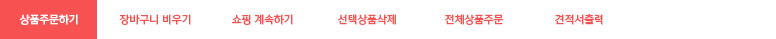
<style>
.page{position:relative;width:776px;height:39px;background:#ffffff}
.page>*{position:absolute;margin:0}
.t1{font:10px "YoonGothicPro770";color:#ffffff}
.t2{font:10px "YoonGothicPro770";color:#f85151}
</style>
<div class="page">
<p class="t1" style="left:19px;top:14px;width:59px;height:11px">상품주문하기</p>
<p class="t2" style="left:119px;top:14px;width:72px;height:11px">장바구니 비우기</p>
<p class="t2" style="left:232px;top:14px;width:61px;height:11px">쇼핑 계속하기</p>
<p class="t2" style="left:337px;top:14px;width:59px;height:11px">선택상품삭제</p>
<p class="t2" style="left:444px;top:14px;width:60px;height:11px">전체상품주문</p>
<p class="t2" style="left:555px;top:14px;width:48px;height:11px">견적서출력</p>
</div>
